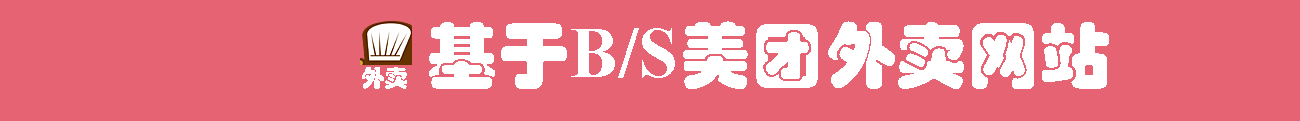
<style>
.page{position:relative;width:1300px;height:121px;background:#e66373}
.page>*{position:absolute;margin:0}
.t1{font:72px "STHupo";color:#ffffff}
.t2{font:72px "TimesNewRomanPS-BoldMT";color:#ffffff}
.t3{font:24px "STHupo";color:#ffffff}
</style>
<div class="page">
<p class="t1" style="left:429px;top:21px;width:680px;height:68px">基于<span class="t2">B/S</span>美团外卖网站</p>
<p class="t3" style="left:362px;top:67px;width:45px;height:22px">外卖</p>
</div>
